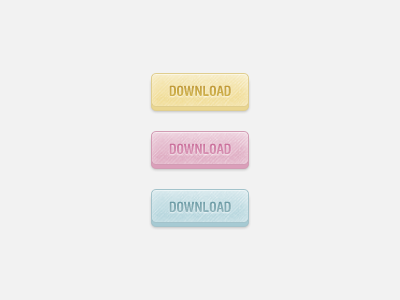
<style>
.page{position:relative;width:400px;height:300px;background:#f2f2f2}
.page>*{position:absolute;margin:0}
.t1{font:14px "HelveticaRoundedLTStd-BdCn";color:#ceb04c;text-transform:uppercase}
.t2{font:14px "HelveticaRoundedLTStd-BdCn";color:#d68fb1;text-transform:uppercase}
.t3{font:14px "HelveticaRoundedLTStd-BdCn";color:#8cb1b9;text-transform:uppercase}
</style>
<div class="page">
<p class="t1" style="left:169px;top:85px;width:62px;height:11px">download</p>
<p class="t2" style="left:169px;top:143px;width:62px;height:11px">download</p>
<p class="t3" style="left:169px;top:201px;width:62px;height:11px">download</p>
</div>
